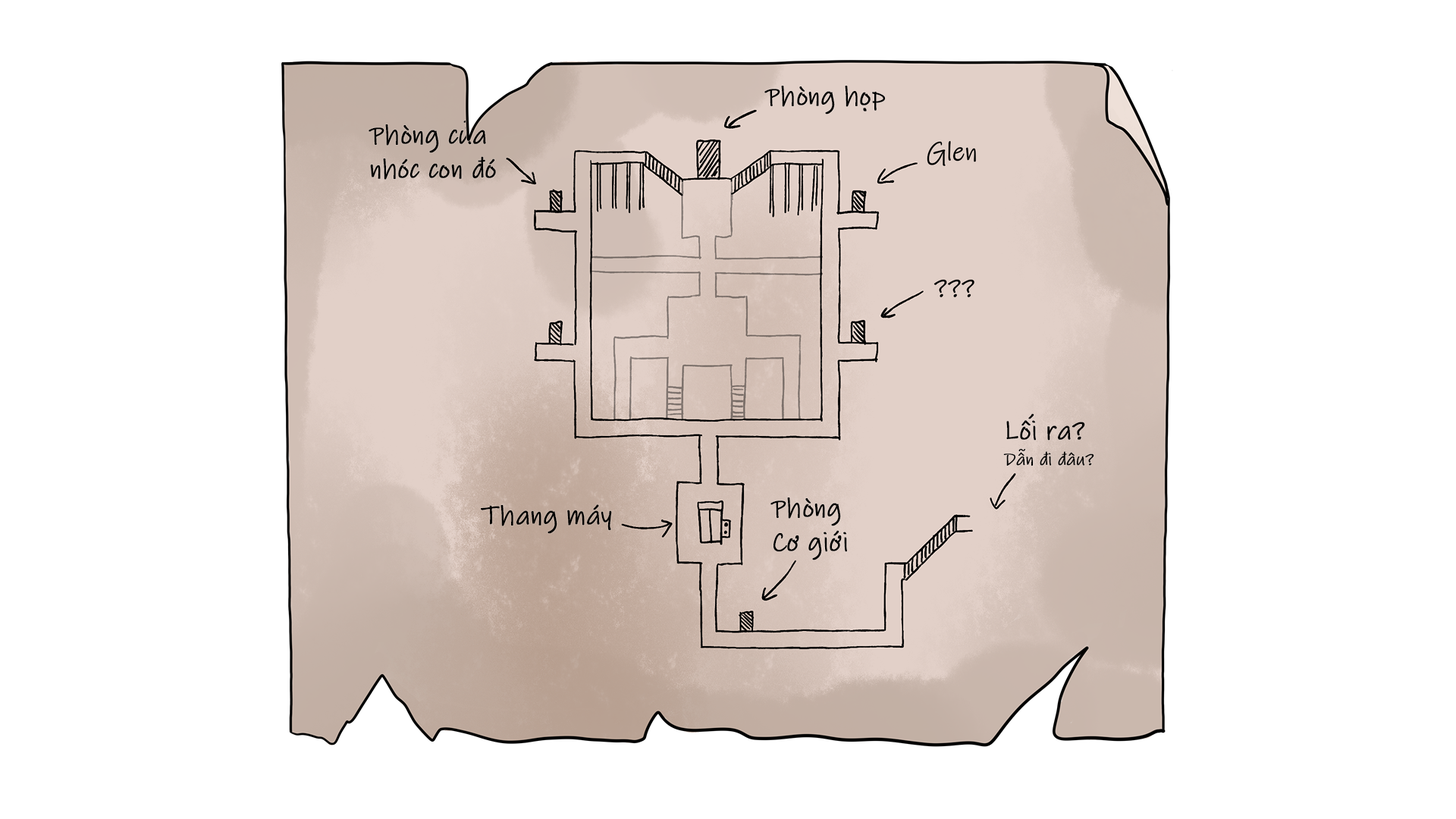
<style>
.page{position:relative;width:1456px;height:819px;background:#ffffff}
.page>*{position:absolute;margin:0}
.t1{font:27.3px "InkFree";color:#000000;font-weight:bold;scale:0.96 1}
.t2{font:27.3px/34.1px "InkFree";color:#000000;font-weight:bold;scale:0.96 1}
.t3{font:17.4px "InkFree";font-weight:bold}
.t4{font:17.4px "InkFree";color:#000000;font-weight:bold}
.t5{font:27.3px "InkFree";font-weight:bold;scale:0.96 1}
</style>
<div class="page">
<p class="t1" style="left:764px;top:86px;width:122px;height:29px">Phòng hop</p>
<p class="t2" style="left:369px;top:124px;width:127px;height:56px">Phòng cua<br>nhóc con đó</p>
<p class="t1" style="left:1006px;top:420px;width:79px;height:21px">Lôi ra?</p>
<p class="t3" style="left:1018px;top:448px;width:8px;height:13px">ũ</p>
<p class="t4" style="left:1003px;top:451px;width:91px;height:15px">Dân đi đâu?</p>
<p class="t2" style="left:770px;top:497px;width:77px;height:63px">Phòng<br>Cơ giơi</p>
<p class="t1" style="left:481px;top:504px;width:131px;height:30px">Thang máy</p>
<p class="t5" style="left:830px;top:530px;width:10px;height:20px">ó</p>
</div>
